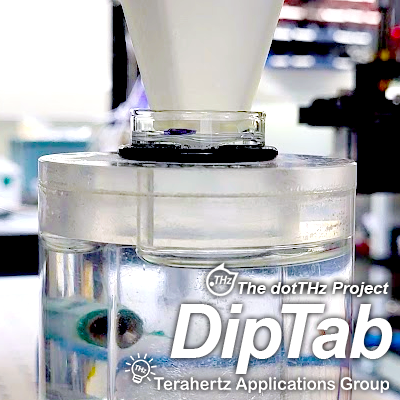
<style>
.page{position:relative;width:400px;height:400px}
.page>*{position:absolute;margin:0}
.t1{font:16.7px "Arial-BoldItalicMT";color:#ffffff}
.t2{font:75px "Arial-BoldItalicMT";letter-spacing:-0.025em;color:#ffffff}
</style>
<div class="page">
<p class="t1" style="left:237px;top:282px;width:152px;height:15px">The dotTHz Project</p>
<p class="t2" style="left:170px;top:304px;width:223px;height:70px">DipTab</p>
</div>
